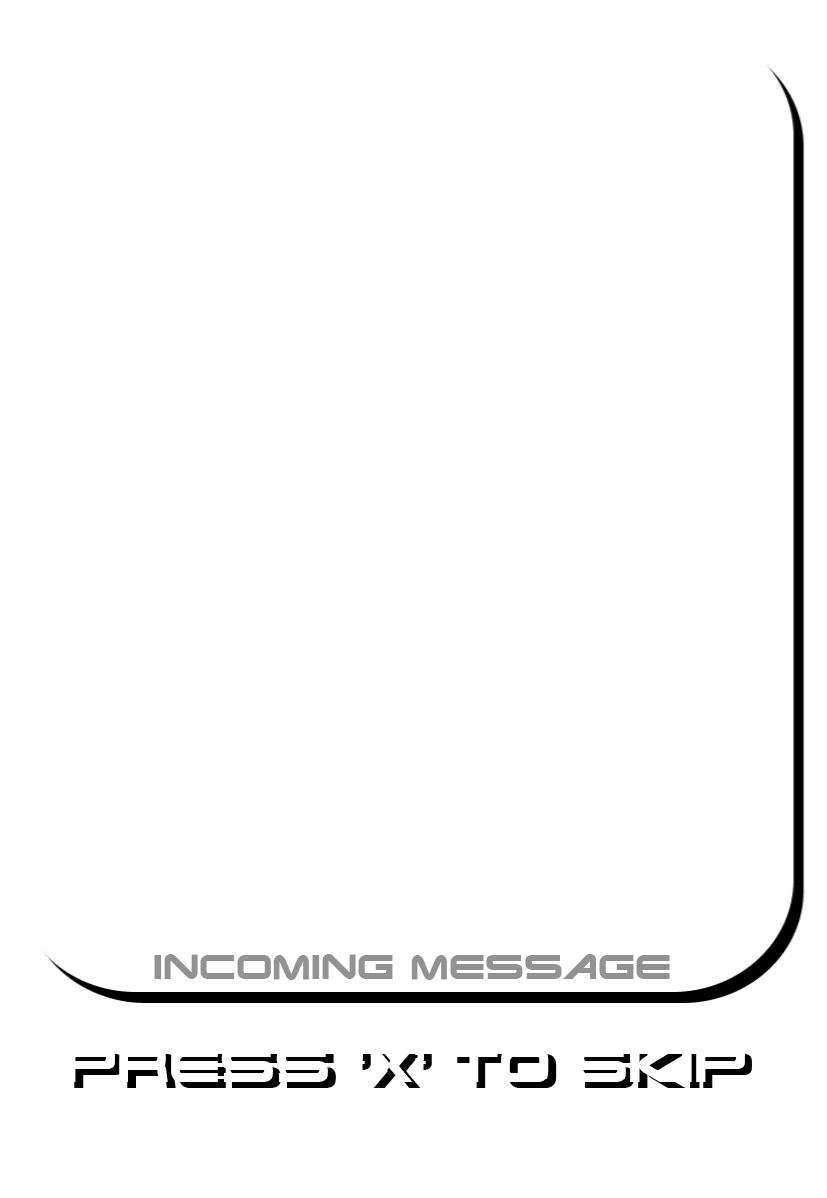
<style>
.page{position:relative;width:827px;height:1198px;background:#ffffff}
.page>*{position:absolute;margin:0}
.t1{font:32.6px "TerminatorRealNFI";color:#929292}
.t2{font:46.1px "TerminatorRealNFI";color:#ffffff}
.t3{font:46.1px "TerminatorRealNFI"}
</style>
<div class="page">
<p class="t1" style="left:154px;top:954px;width:516px;height:26px">Incoming Message</p>
<p class="t2" style="left:66px;top:1048px;width:679px;height:34px">Press 'x' to skip</p>
<p class="t3" style="left:74px;top:1054px;width:678px;height:34px">Press 'x' to skip</p>
</div>
